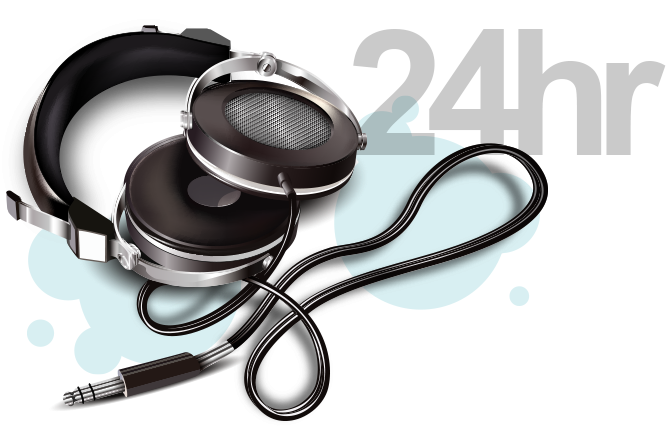
<style>
.page{position:relative;width:667px;height:430px;background:#ffffff}
.page>*{position:absolute;margin:0}
.t1{font:174.9px "Arial-BoldMT";letter-spacing:-0.1em;color:#cacaca}
</style>
<div class="page">
<p class="t1" style="left:350px;top:29px;width:316px;height:126px">24hr</p>
</div>
